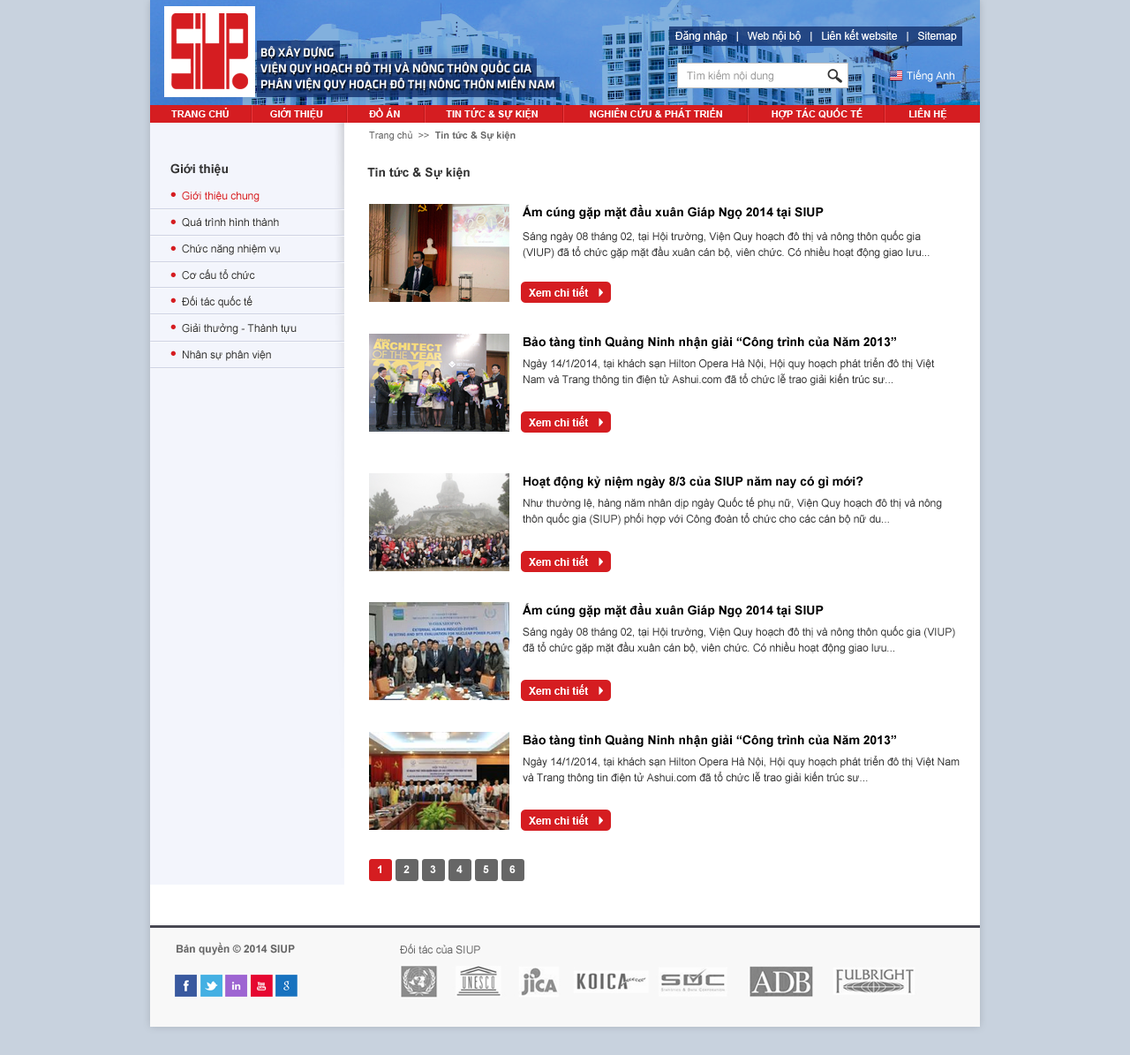
<style>
.page{position:relative;width:1130px;height:1055px;background:#ffffff}
.page>*{position:absolute;margin:0}
.t1{font:9.7px "Arial-BoldMT";color:#666666}
.t2{font:9.7px "ArialMT";color:#666666}
.t3{font:12.4px "Arial-BoldMT";color:#333333}
.t4{font:10.6px/26.5px "ArialMT";color:#333333}
.t5{font:10.6px/26.5px "ArialMT";color:#d51d21}
.t6{font:12.4px "Arial-BoldMT";color:#000000}
.t7{font:10.6px/15.9px "ArialMT";color:#333333}
.t8{font:10.6px "Arial-BoldMT";color:#ffffff}
.t9{font:10.6px "Arial-BoldMT";color:#666666}
.t10{font:10.6px "ArialMT";color:#666666}
</style>
<div class="page">
<p class="t1" style="left:369px;top:131px;width:147px;height:10px"><span class="t2">Trang chủ  &gt;&gt;  </span>Tin tức &amp; Sự kiện</p>
<p class="t3" style="left:170px;top:163px;width:58px;height:13px">Giới thiệu</p>
<p class="t3" style="left:367px;top:167px;width:103px;height:12px">Tin tức &amp; Sự kiện</p>
<p class="t4" style="left:182px;top:192px;width:115px;height:169px"><span class="t5">Giới thiệu chung<br></span>Quá trình hình thành<br>Chức năng nhiệm vụ<br>Cơ cấu tổ chức<br>Đối tác quốc tế<br>Giải thưởng - Thành tựu<br>Nhân sự phân viện</p>
<p class="t6" style="left:523px;top:205px;width:301px;height:14px">Ấm cúng gặp mặt đầu xuân Giáp Ngọ 2014 tại SIUP</p>
<p class="t7" style="left:523px;top:230px;width:407px;height:29px">Sáng ngày 08 tháng 02, tại Hội trường, Viện Quy hoạch đô thị và nông thôn quốc gia (VIUP) đã tổ chức gặp mặt đầu xuân cán bộ, viên chức. Có nhiều hoạt động giao lưu...</p>
<p class="t8" style="left:529px;top:286px;width:60px;height:11px">Xem chi tiết</p>
<p class="t6" style="left:524px;top:336px;width:372px;height:13px">Bảo tàng tỉnh Quảng Ninh nhận giải “Công trình của Năm 2013”</p>
<p class="t7" style="left:524px;top:358px;width:411px;height:28px">Ngày 14/1/2014, tại khách sạn Hilton Opera Hà Nội, Hội quy hoạch phát triển đô thị Việt Nam và Trang thông tin điện tử Ashui.com đã tổ chức lễ trao giải kiến trúc sư...</p>
<p class="t8" style="left:529px;top:416px;width:60px;height:10px">Xem chi tiết</p>
<p class="t6" style="left:524px;top:476px;width:340px;height:12px">Hoạt động kỷ niệm ngày 8/3 của SIUP năm nay có gì mới?</p>
<p class="t7" style="left:523px;top:497px;width:419px;height:28px">Như thường lệ, hàng năm nhân dịp ngày Quốc tế phụ nữ, Viện Quy hoạch đô thị và nông thôn quốc gia (SIUP) phối hợp với Công đoàn tổ chức cho các cán bộ nữ du...</p>
<p class="t8" style="left:529px;top:555px;width:60px;height:11px">Xem chi tiết</p>
<p class="t6" style="left:523px;top:603px;width:301px;height:14px">Ấm cúng gặp mặt đầu xuân Giáp Ngọ 2014 tại SIUP</p>
<p class="t7" style="left:523px;top:626px;width:432px;height:28px">Sáng ngày 08 tháng 02, tại Hội trường, Viện Quy hoạch đô thị và nông thôn quốc gia (VIUP) đã tổ chức gặp mặt đầu xuân cán bộ, viên chức. Có nhiều hoạt động giao lưu...</p>
<p class="t8" style="left:529px;top:684px;width:60px;height:11px">Xem chi tiết</p>
<p class="t6" style="left:524px;top:735px;width:372px;height:12px">Bảo tàng tỉnh Quảng Ninh nhận giải “Công trình của Năm 2013”</p>
<p class="t7" style="left:523px;top:756px;width:437px;height:28px">Ngày 14/1/2014, tại khách sạn Hilton Opera Hà Nội, Hội quy hoạch phát triển đô thị Việt Nam và Trang thông tin điện tử Ashui.com đã tổ chức lễ trao giải kiến trúc sư...</p>
<p class="t8" style="left:529px;top:814px;width:60px;height:11px">Xem chi tiết</p>
<p class="t8" style="left:378px;top:865px;width:3px;height:8px">1</p>
<p class="t8" style="left:404px;top:865px;width:6px;height:8px">2</p>
<p class="t8" style="left:430px;top:865px;width:6px;height:8px">3</p>
<p class="t8" style="left:456px;top:865px;width:7px;height:8px">4</p>
<p class="t8" style="left:483px;top:865px;width:6px;height:8px">5</p>
<p class="t8" style="left:509px;top:865px;width:7px;height:8px">6</p>
<p class="t9" style="left:177px;top:942px;width:118px;height:13px">Bản quyền © 2014 SIUP</p>
<p class="t10" style="left:400px;top:944px;width:80px;height:10px">Đối tác của SIUP</p>
</div>
